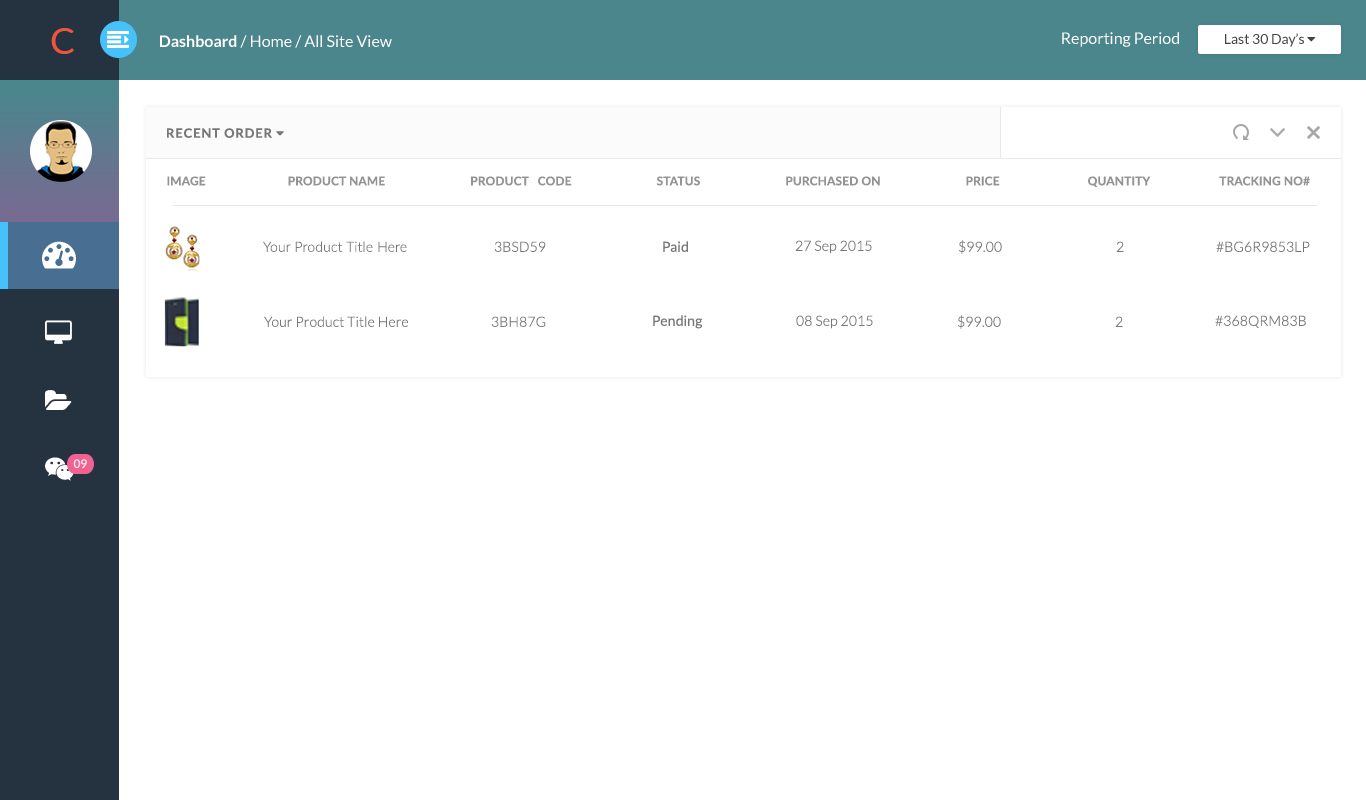
<style>
.page{position:relative;width:1366px;height:800px;background:#ffffff}
.page>*{position:absolute;margin:0}
.t1{font:37px "Lato-Regular";letter-spacing:0.08em;color:#ed553c}
.t2{font:16px "Lato-Regular";color:#ffffff}
.t3{font:16px "Lato-Bold";color:#ffffff}
.t4{font:12px "Lato-Bold";letter-spacing:0.01em;color:#949393;text-transform:uppercase}
.t5{font:14px "Lato-Light";letter-spacing:0.01em;color:#777777}
.t6{font:14px "Lato-Regular";letter-spacing:0.01em;color:#777777}
.t7{font:12px "Lato-Bold";color:#eaebec}
</style>
<div class="page">
<p class="t1" style="left:51px;top:28px;width:23px;height:26px">C</p>
<p class="t2" style="left:160px;top:35px;width:232px;height:13px"><span class="t3">Dashboard </span>/ Home / All Site View</p>
<p class="t2" style="left:1062px;top:32px;width:117px;height:15px">Reporting Period</p>
<p class="t4" style="left:167px;top:176px;width:1143px;height:11px">Image                           Product Name                            Product   Code                            Status                            Purchased On                            Price                             Quantity                       Tracking No#</p>
<p class="t5" style="left:263px;top:241px;width:144px;height:11px">Your Product Title Here</p>
<p class="t5" style="left:494px;top:241px;width:52px;height:11px">3BSD59</p>
<p class="t6" style="left:663px;top:241px;width:25px;height:11px">Paid</p>
<p class="t5" style="left:795px;top:240px;width:77px;height:14px">27 Sep 2015</p>
<p class="t5" style="left:959px;top:240px;width:43px;height:14px">$99.00</p>
<p class="t5" style="left:1116px;top:241px;width:8px;height:11px">2</p>
<p class="t5" style="left:1216px;top:241px;width:94px;height:11px">#BG6R9853LP</p>
<p class="t5" style="left:264px;top:316px;width:144px;height:11px">Your Product Title Here</p>
<p class="t5" style="left:491px;top:316px;width:55px;height:11px">3BH87G</p>
<p class="t6" style="left:653px;top:315px;width:50px;height:14px">Pending</p>
<p class="t5" style="left:796px;top:315px;width:77px;height:14px">08 Sep 2015</p>
<p class="t5" style="left:958px;top:315px;width:43px;height:14px">$99.00</p>
<p class="t5" style="left:1115px;top:316px;width:8px;height:11px">2</p>
<p class="t5" style="left:1215px;top:315px;width:91px;height:13px">#368QRM83B</p>
<p class="t7" style="left:73px;top:459px;width:14px;height:9px">09</p>
</div>
